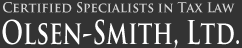
<style>
.page{position:relative;width:242px;height:48px;background:#333333}
.page>*{position:absolute;margin:0}
.t1{font:13.3px "TrajanPro-Bold";color:#d6d6d6;scale:0.95 1}
.t2{font:32px "TrajanPro-Bold";color:#ffffff;scale:0.74 1}
</style>
<div class="page">
<p class="t1" style="left:3px;top:2px;width:232px;height:11px">Certified Specialists in Tax Law</p>
<p class="t2" style="left:2px;top:19px;width:237px;height:29px">Olsen-Smith, Ltd.</p>
</div>
